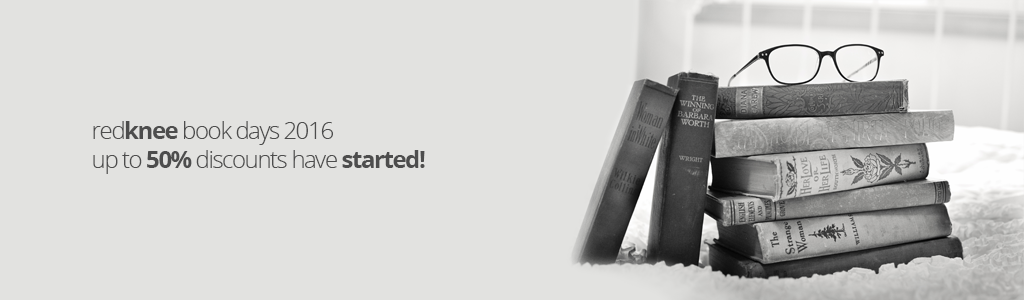
<style>
.page{position:relative;width:1024px;height:300px;background:#e2e2e0}
.page>*{position:absolute;margin:0}
.t1{font:24px "OpenSans-Light";letter-spacing:-0.06em;color:#4d4d4d}
.t2{font:24px "OpenSans-Bold";letter-spacing:-0.06em;color:#4d4d4d}
</style>
<div class="page">
<p class="t1" style="left:93px;top:121px;width:332px;height:53px">red<span class="t2">knee</span> book days 2016<br>up to <span class="t2">50%</span> discounts have <span class="t2">started!</span></p>
</div>
